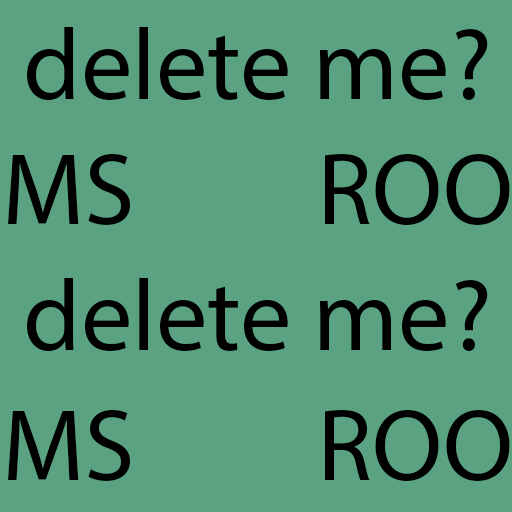
<style>
.page{position:relative;width:512px;height:512px;background:#5aa281}
.page>*{position:absolute;margin:0}
.t1{font:102px "MyriadHebrew-Regular";color:#000000}
</style>
<div class="page">
<p class="t1" style="left:27px;top:27px;width:461px;height:74px">delete me?</p>
<p class="t1" style="left:8px;top:154px;width:122px;height:71px">MS</p>
<p class="t1" style="left:325px;top:154px;width:185px;height:71px">ROO</p>
<p class="t1" style="left:27px;top:278px;width:461px;height:74px">delete me?</p>
<p class="t1" style="left:8px;top:410px;width:122px;height:71px">MS</p>
<p class="t1" style="left:325px;top:410px;width:185px;height:71px">ROO</p>
</div>
